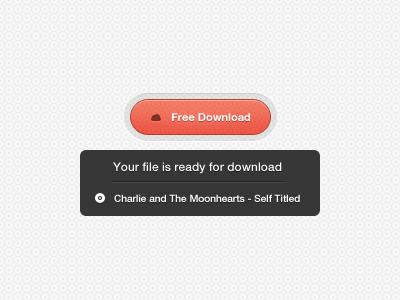
<style>
.page{position:relative;width:400px;height:300px;background:#f7f7f7}
.page>*{position:absolute;margin:0}
.t1{font:11px "HelveticaNeueLTCom-Bd";color:#ffffff}
.t2{font:12px "HelveticaNeueLTCom-Md";color:#ffffff}
.t3{font:10px "HelveticaNeueLTCom-Md";color:#ffffff}
</style>
<div class="page">
<p class="t1" style="left:172px;top:113px;width:78px;height:8px">Free Download</p>
<p class="t2" style="left:113px;top:162px;width:169px;height:12px">Your file is ready for download</p>
<p class="t3" style="left:114px;top:194px;width:186px;height:8px">Charlie and The Moonhearts - Self Titled</p>
</div>
